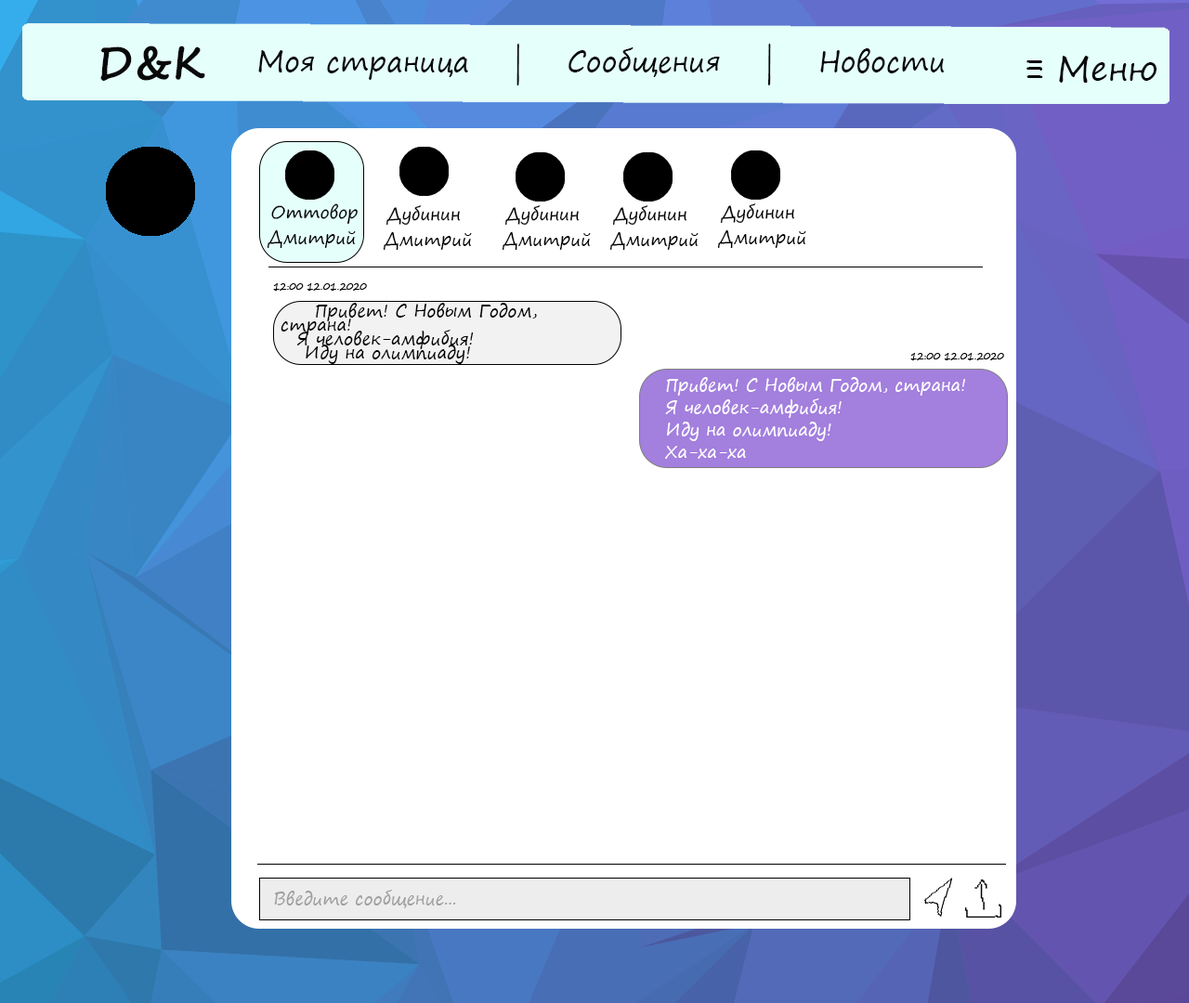
<style>
.page{position:relative;width:1189px;height:1003px;background:#ffffff}
.page>*{position:absolute;margin:0}
.t1{font:44.6px "SegoePrint-Bold";color:#090909}
.t2{font:27.9px "SegoePrint";color:#090909}
.t3{font:33.4px "SegoePrint";color:#090909}
.t4{font:16.7px "SegoePrint";color:#000000}
.t5{font:16.7px/13.9px "SegoePrint";color:#000000}
.t6{font:16.7px/22.3px "SegoePrint";color:#ffffff}
.t7{font:16.7px "SegoePrint";color:#a0a0a0}
</style>
<div class="page">
<p class="t1" style="left:100px;top:46px;width:105px;height:35px;rotate:-1deg">D&amp;K</p>
<p class="t2" style="left:258px;top:44px;width:687px;height:41px">Моя страница    |    Сообщения    |    Новости</p>
<p class="t3" style="left:1026px;top:56px;width:130px;height:27px">≡ Меню</p>
<p class="t4" style="left:271px;top:203px;width:87px;height:22px">Оттовордемгентшенфельда</p>
<p class="t4" style="left:385px;top:205px;width:76px;height:21px">Дубинин</p>
<p class="t4" style="left:504px;top:205px;width:76px;height:21px">Дубинин</p>
<p class="t4" style="left:612px;top:205px;width:75px;height:21px">Дубинин</p>
<p class="t4" style="left:720px;top:203px;width:75px;height:21px">Дубинин</p>
<p class="t4" style="left:267px;top:230px;width:89px;height:18px">Дмитрий</p>
<p class="t4" style="left:383px;top:232px;width:89px;height:18px">Дмитрий</p>
<p class="t4" style="left:502px;top:232px;width:89px;height:18px">Дмитрий</p>
<p class="t4" style="left:609px;top:232px;width:89px;height:18px">Дмитрий</p>
<p class="t4" style="left:717px;top:230px;width:89px;height:18px">Дмитрий</p>
<p class="t5" style="left:280px;top:303px;width:257px;height:61px">Привет! С Новым Годом, страна!<br>Я человек-амфибия!<br>Иду на олимпиаду!<br>Ха-ха-ха</p>
<p class="t6" style="left:665px;top:377px;width:300px;height:82px">Привет! С Новым Годом, страна!<br>Я человек-амфибия!<br>Иду на олимпиаду!<br>Ха-ха-ха</p>
<p class="t7" style="left:274px;top:890px;width:182px;height:18px">Введите сообщение...</p>
</div>
